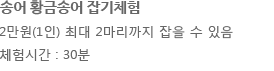
<style>
.page{position:relative;width:274px;height:71px;background:#ffffff}
.page>*{position:absolute;margin:0}
.t1{font:15px "NanumBarunGothicBold";color:#666666}
.t2{font:13px "MalgunGothicRegular";color:#666666}
</style>
<div class="page">
<p class="t1" style="left:0px;top:0px;width:140px;height:15px">송어 황금송어 잡기체험</p>
<p class="t2" style="left:0px;top:26px;width:233px;height:35px">2만원(1인) 최대 2마리까지 잡을 수 있음<br>체험시간 : 30분</p>
</div>
